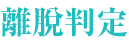
<style>
.page{position:relative;width:129px;height:43px;background:#ffffff}
.page>*{position:absolute;margin:0}
.t1{font:32px "RyuminPro-ExBold";color:#1dbdc0}
</style>
<div class="page">
<p class="t1" style="left:1px;top:7px;width:127px;height:30px">離脫判定</p>
</div>
